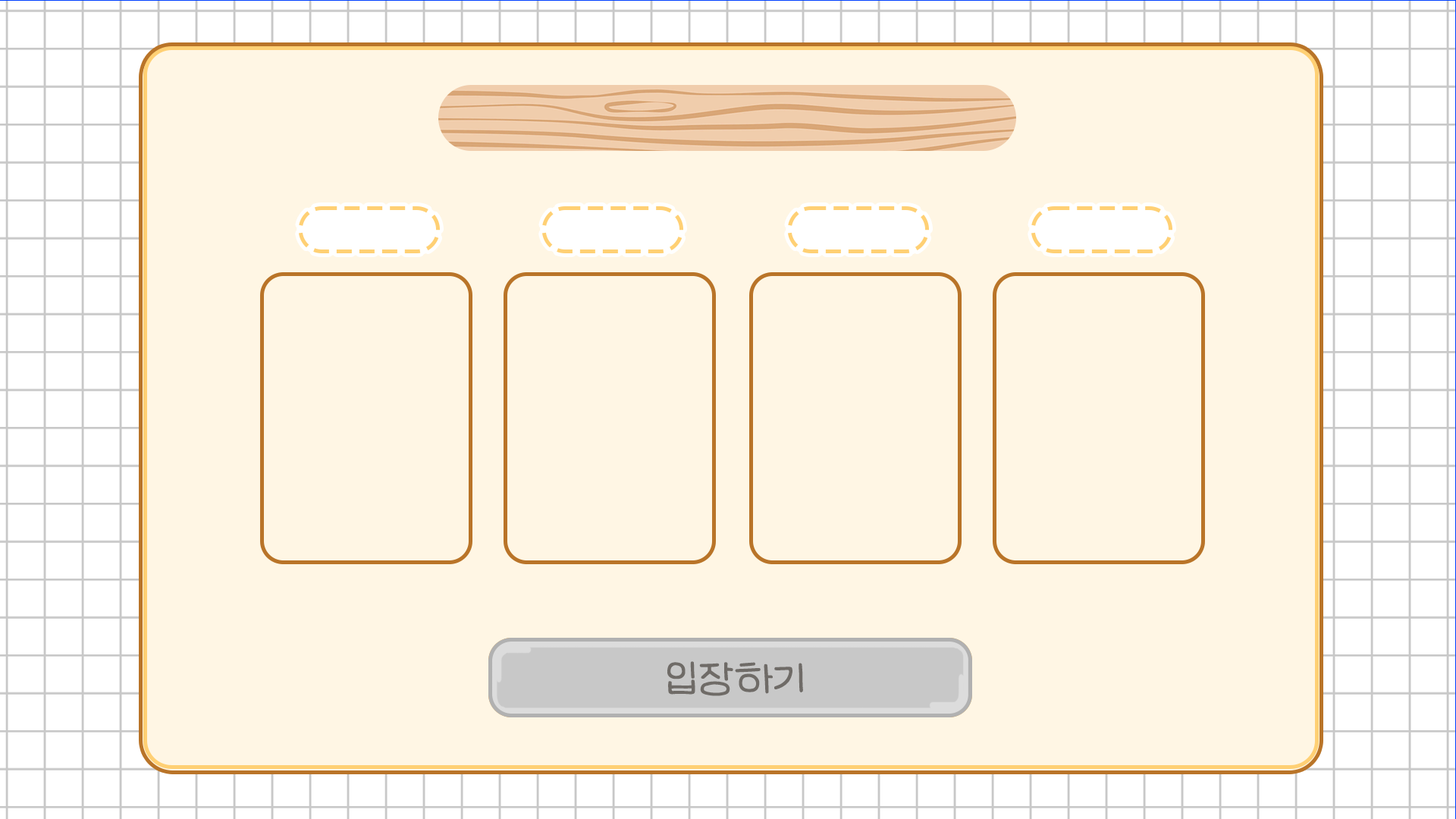
<style>
.page{position:relative;width:1456px;height:819px;background:#fff6e4}
.page>*{position:absolute;margin:0}
.t1{font:45.5px "LeeSeoyun";color:#6f6b67}
</style>
<div class="page">
<p class="t1" style="left:667px;top:661px;width:136px;height:35px">입장하기</p>
<p class="t1" style="left:667px;top:661px;width:136px;height:35px">입장하기</p>
</div>
